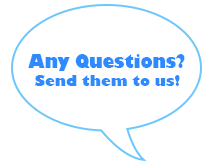
<style>
.page{position:relative;width:214px;height:163px;background:#ffffff}
.page>*{position:absolute;margin:0}
.t1{font:18px "GillSans-UltraBold";color:#3189ff;scale:0.92 1}
.t2{font:14px "GillSans-UltraBold";color:#3288ff}
</style>
<div class="page">
<p class="t1" style="left:28px;top:54px;width:157px;height:17px">Any Questions?</p>
<p class="t2" style="left:35px;top:75px;width:145px;height:11px">Send them to us!</p>
</div>
